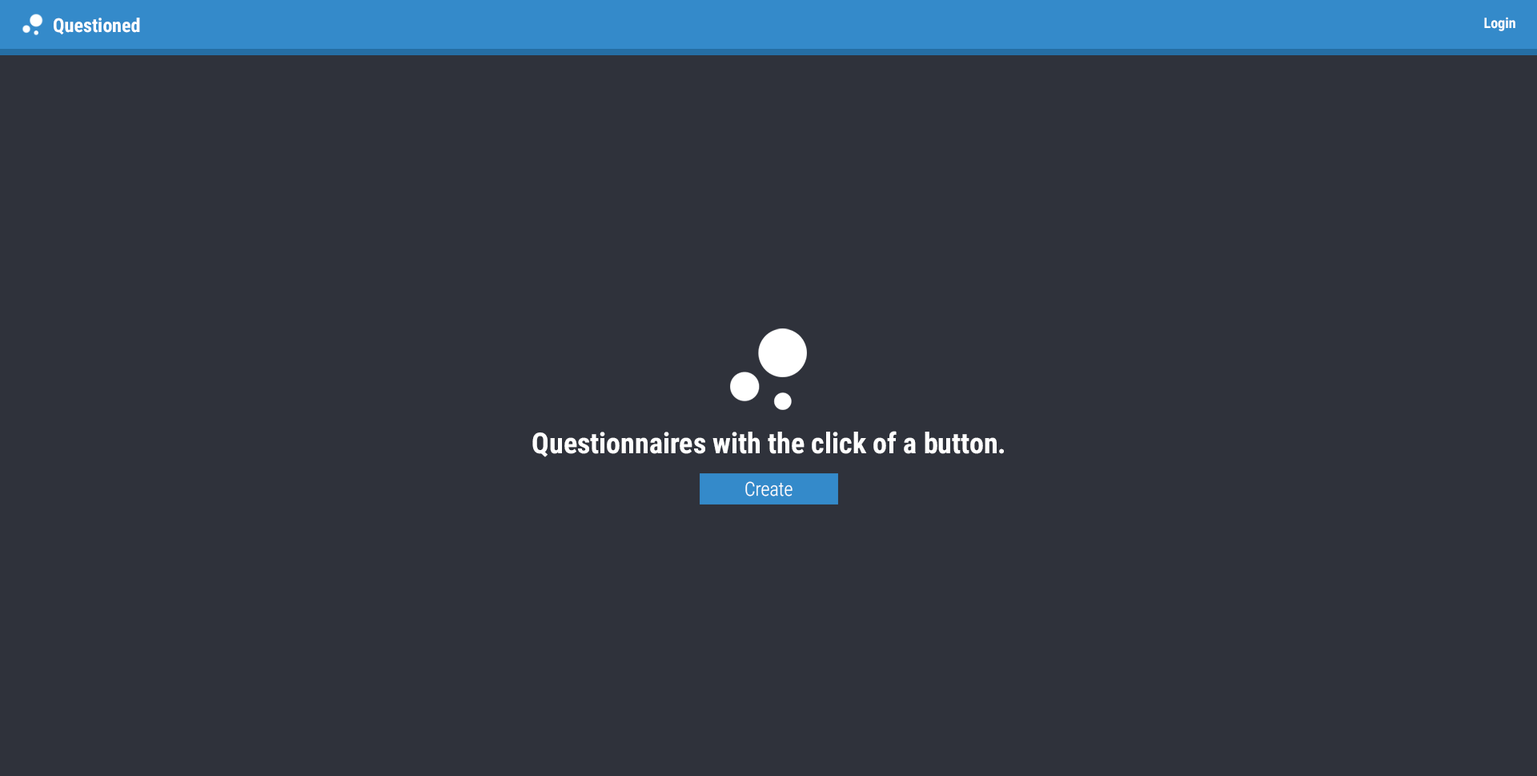
<style>
.page{position:relative;width:1537px;height:776px;background:#2f323b}
.page>*{position:absolute;margin:0}
.t1{font:19.2px "RobotoCondensed-Bold";color:#ffffff}
.t2{font:14.4px "RobotoCondensed-Bold";color:#ffffff}
.t3{font:28.8px "RobotoCondensed-Bold";color:#ffffff}
.t4{font:19.2px "RobotoCondensed-Light";color:#ffffff}
</style>
<div class="page">
<p class="t1" style="left:54px;top:18px;width:86px;height:16px">Questioned</p>
<p class="t2" style="left:1484px;top:17px;width:31px;height:14px">Login</p>
<p class="t3" style="left:532px;top:431px;width:472px;height:26px">Questionnaires with the click of a button.</p>
<p class="t4" style="left:745px;top:481px;width:48px;height:15px">Create</p>
</div>
